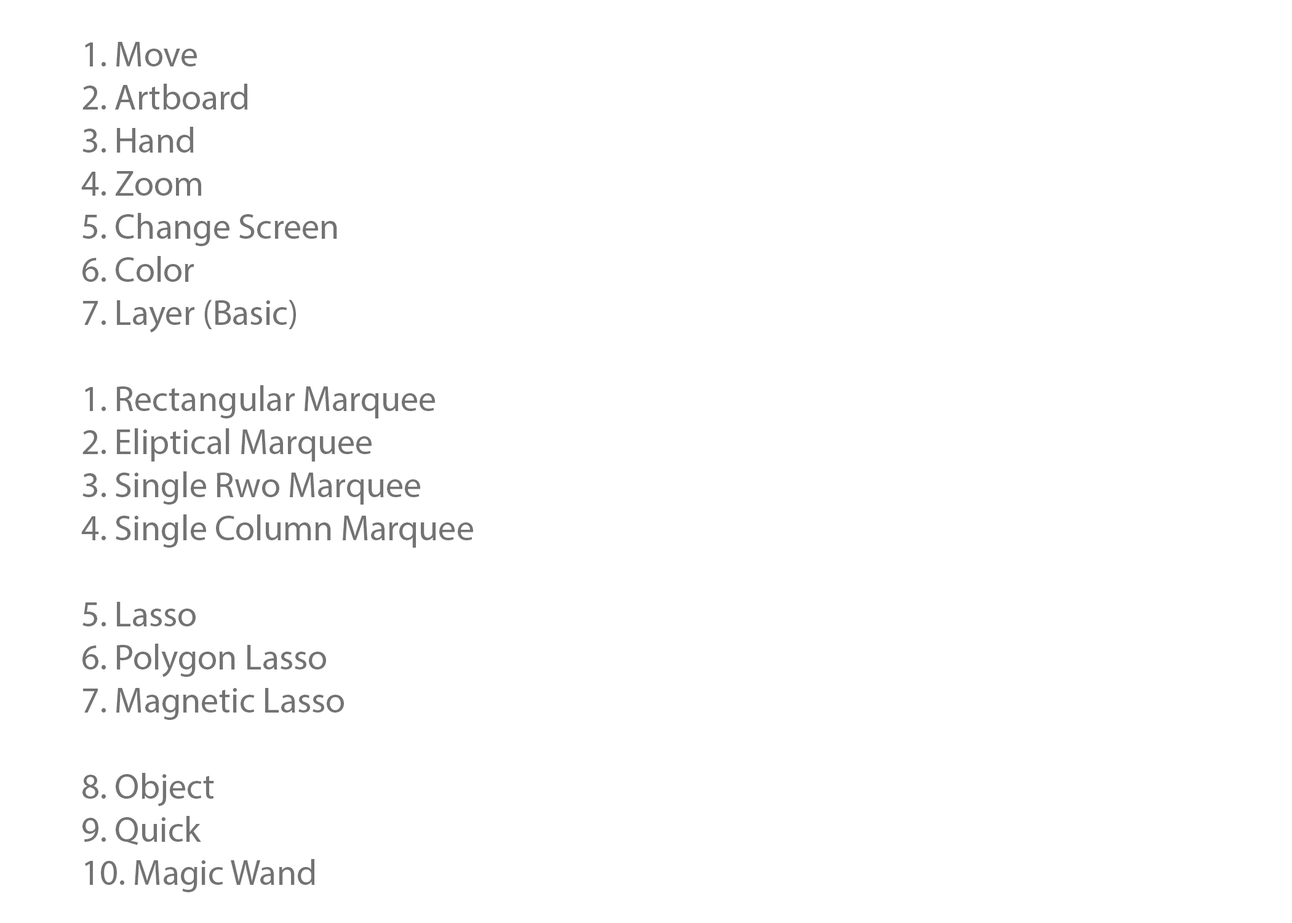
<style>
.page{position:relative;width:1292px;height:923px;background:#ffffff}
.page>*{position:absolute;margin:0}
.t1{font:35.9px "MyriadPro-Regular";color:#737373}
</style>
<div class="page">
<p class="t1" style="left:81px;top:42px;width:392px;height:850px">1. Move<br>2. Artboard<br>3. Hand <br>4. Zoom<br>5. Change Screen<br>6. Color<br>7. Layer (Basic)<br><br>1. Rectangular Marquee<br>2. Eliptical Marquee<br>3. Single Rwo Marquee<br>4. Single Column Marquee<br><br>5. Lasso<br>6. Polygon Lasso<br>7. Magnetic Lasso<br><br>8. Object <br>9. Quick <br>10. Magic Wand</p>
</div>
